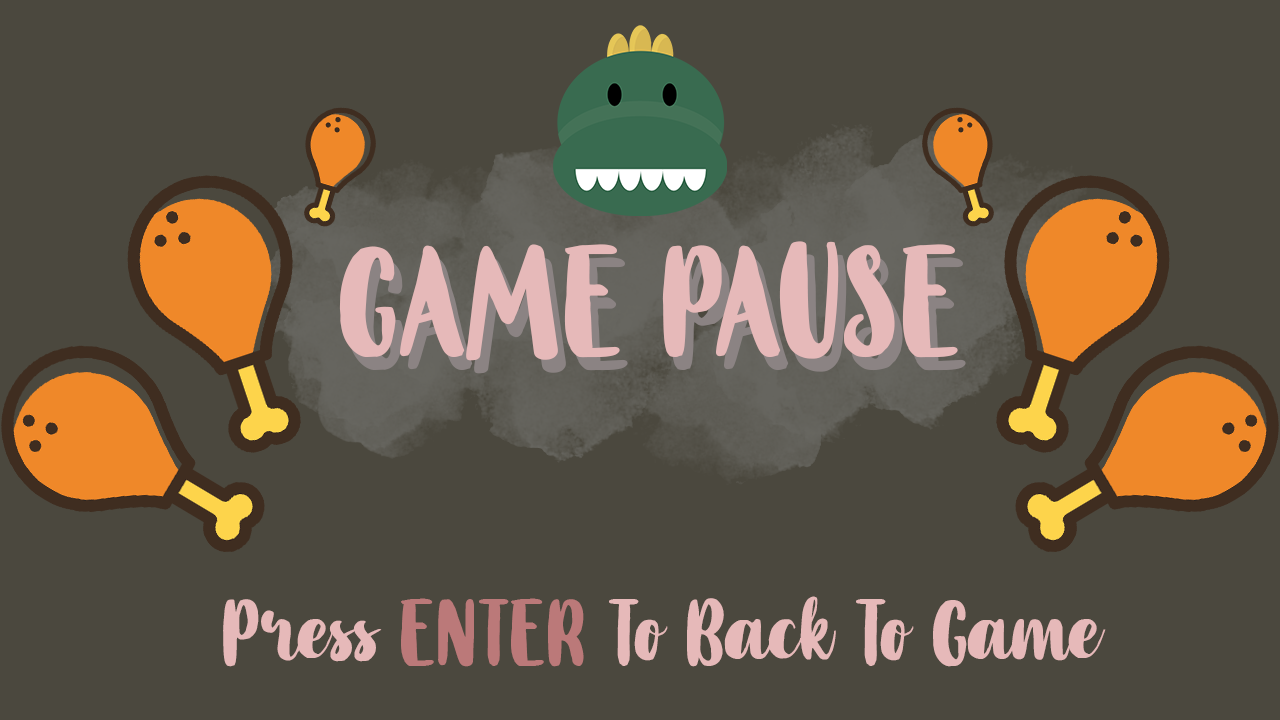
<style>
.page{position:relative;width:1280px;height:720px;background:#4b483e}
.page>*{position:absolute;margin:0}
.t1{font:120px "MahoniFreePersonalUse";color:#e6b9b9}
.t2{font:120px "MahoniFreePersonalUse"}
.t3{font:72px "MahoniFreePersonalUse";color:#e6b9b9}
.t4{font:72px "MahoniFreePersonalUse";color:#bb7979}
</style>
<div class="page">
<p class="t1" style="left:339px;top:241px;width:619px;height:120px">GAME PAUSE</p>
<p class="t2" style="left:347px;top:254px;width:619px;height:120px">GAME PAUSE</p>
<p class="t3" style="left:223px;top:596px;width:883px;height:71px">Press <span class="t4">ENTER</span> To Back To Game</p>
</div>
